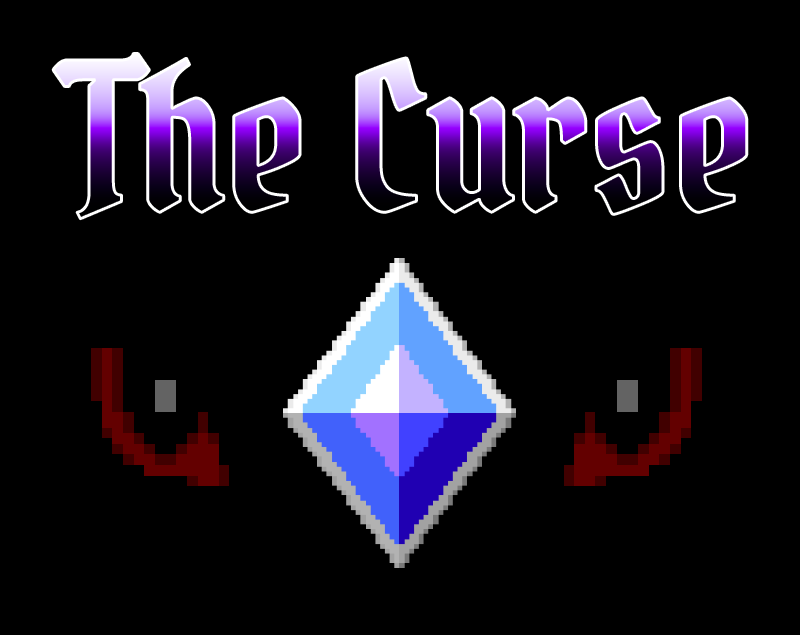
<style>
.page{position:relative;width:800px;height:635px;background:#000000}
.page>*{position:absolute;margin:0}
.t1{font:200px "PirataOne-Regular"}
</style>
<div class="page">
<p class="t1" style="left:53px;top:53px;width:694px;height:166px">The Curse</p>
</div>
